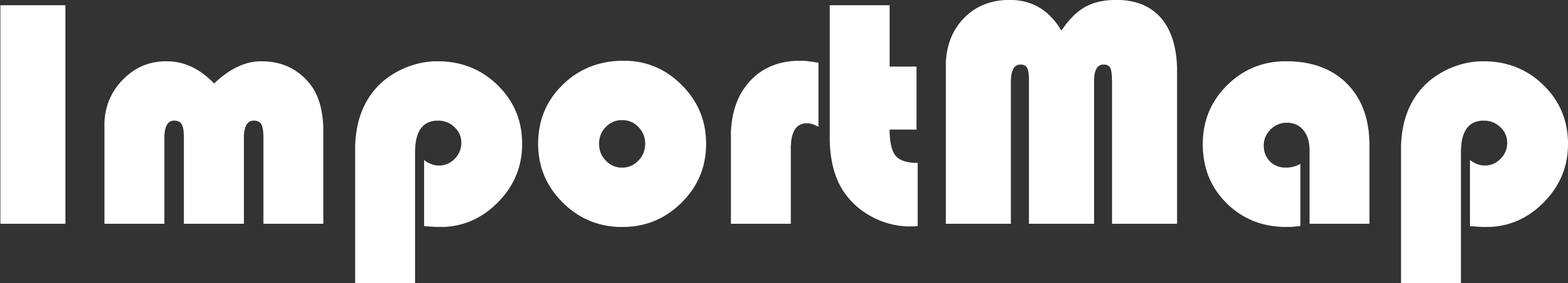
<style>
.page{position:relative;width:1568px;height:283px;background:#333333}
.page>*{position:absolute;margin:0}
.t1{font:327.6px "Bauhaus93";color:#ffffff}
</style>
<div class="page">
<p class="t1" style="left:0px;top:0px;width:1568px;height:283px">ImportMap</p>
</div>
